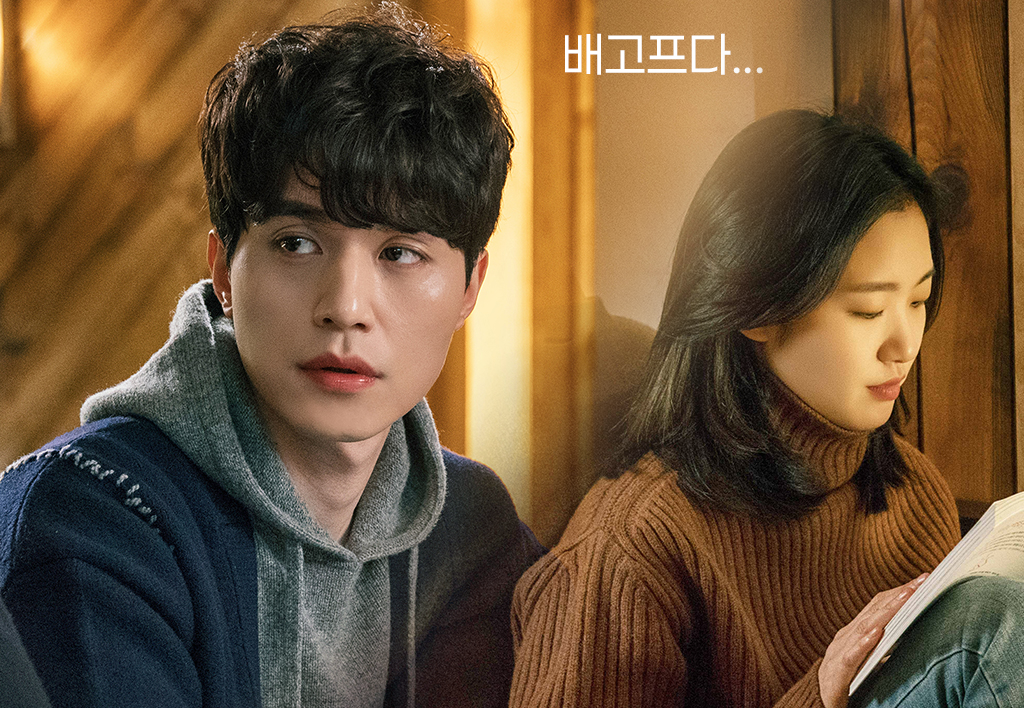
<style>
.page{position:relative;width:1024px;height:708px}
.page>*{position:absolute;margin:0}
.t1{font:48px "Paperlogy-4Regular";color:#ffffff}
</style>
<div class="page">
<p class="t1" style="left:565px;top:33px;width:198px;height:42px">배고프다...</p>
</div>
